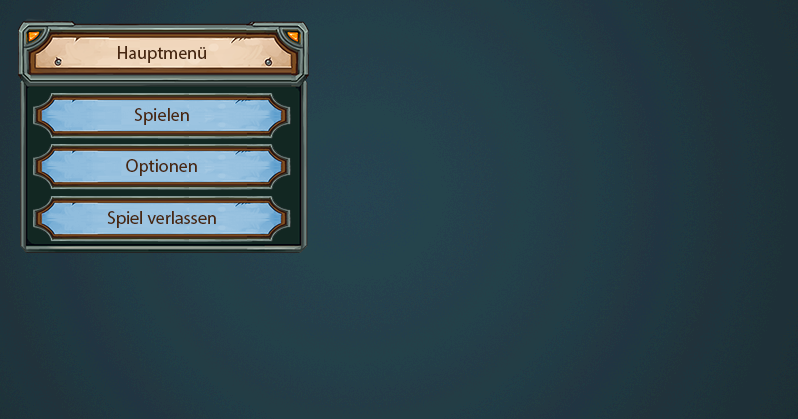
<style>
.page{position:relative;width:798px;height:419px}
.page>*{position:absolute;margin:0}
.t1{font:18px "MyriadPro-Regular";color:#492811}
</style>
<div class="page">
<p class="t1" style="left:118px;top:46px;width:88px;height:17px">Hauptmenü</p>
<p class="t1" style="left:134px;top:108px;width:55px;height:17px">Spielen</p>
<p class="t1" style="left:126px;top:159px;width:71px;height:17px">Optionen</p>
<p class="t1" style="left:107px;top:211px;width:109px;height:17px">Spiel verlassen</p>
</div>
